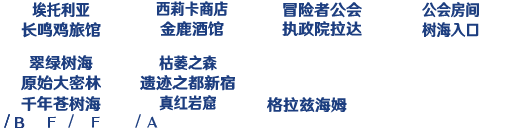
<style>
.page{position:relative;width:512px;height:128px;background:#ffffff}
.page>*{position:absolute;margin:0}
.t1{font:16px "HYWenHei-HEW";color:#1d3e80;scale:0.9 1}
.t2{font:16px "HYWenHei-HEW";color:#1d3e80}
</style>
<div class="page">
<p class="t1" style="left:32px;top:2px;width:58px;height:16px">埃托利亚</p>
<p class="t1" style="left:156px;top:1px;width:72px;height:15px">西莉卡商店</p>
<p class="t2" style="left:283px;top:2px;width:79px;height:16px">冒险者公会</p>
<p class="t1" style="left:422px;top:2px;width:57px;height:16px">公会房间</p>
<p class="t2" style="left:21px;top:22px;width:80px;height:16px">长鸣鸡旅馆</p>
<p class="t2" style="left:160px;top:21px;width:64px;height:15px">金鹿酒馆</p>
<p class="t2" style="left:282px;top:21px;width:80px;height:16px">执政院拉达</p>
<p class="t1" style="left:422px;top:22px;width:57px;height:15px">树海入口</p>
<p class="t2" style="left:29px;top:55px;width:64px;height:16px">翠绿树海</p>
<p class="t1" style="left:159px;top:55px;width:58px;height:16px">枯萎之森</p>
<p class="t2" style="left:21px;top:74px;width:80px;height:17px">原始大密林</p>
<p class="t2" style="left:140px;top:75px;width:95px;height:16px">遗迹之都新宿</p>
<p class="t2" style="left:21px;top:96px;width:80px;height:15px">千年苍树海</p>
<p class="t1" style="left:159px;top:95px;width:57px;height:16px">真红岩窟</p>
<p class="t2" style="left:267px;top:97px;width:80px;height:16px">格拉兹海姆</p>
</div>
